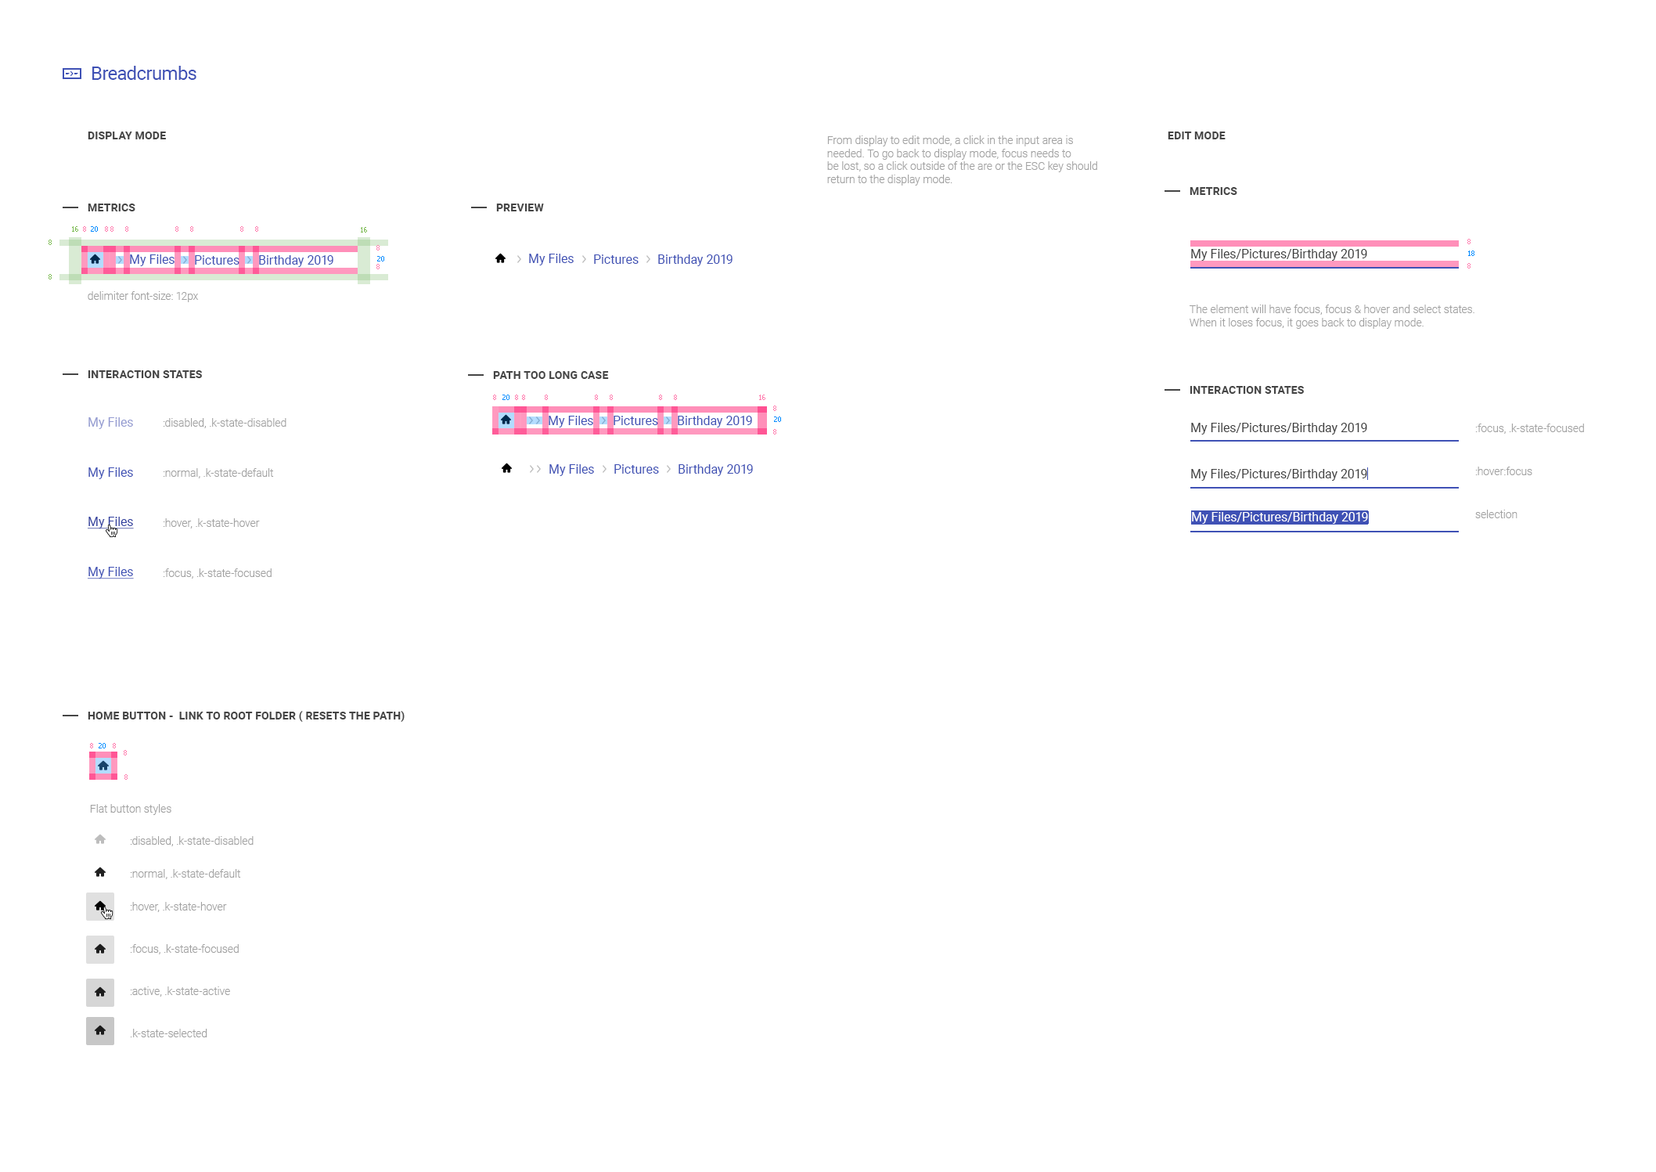
<style>
.page{position:relative;width:1656px;height:1172px;background:#ffffff}
.page>*{position:absolute;margin:0}
.t1{font:18.8px "Roboto-Regular";letter-spacing:-0.025em;color:#3f51b5}
.t2{font:11px "Roboto-Bold";letter-spacing:0.01em;color:#454545;text-transform:uppercase}
.t3{font:11px "Roboto-Light";color:#a1a1a1}
.t4{font:7px "Tahoma";color:#7dbb54}
.t5{font:7px "Tahoma";color:#ff7cae}
.t6{font:7px "Tahoma";color:#008aff}
.t7{font:12.5px "Roboto-Regular";color:#3f51b5}
.t8{font:12.5px "Roboto-Regular";color:#404040}
.t9{font:12.5px "Roboto-Regular";color:#949bd1}
.t10{font:11px/50.1px "Roboto-Light";color:#a1a1a1}
.t11{font:11px/43px "Roboto-Light";color:#a1a1a1}
.t12{font:12.5px "Roboto-Regular";color:#303f9f;text-decoration:underline}
.t13{font:12.5px "Roboto-Regular";color:#ffffff}
.t14{font:12.5px "Roboto-Regular";color:#3f51b5;text-decoration:underline}
.t15{font:11px/32.9px "Roboto-Light";color:#a1a1a1}
.t16{font:11px/42.3px "Roboto-Light";color:#a1a1a1}
</style>
<div class="page">
<p class="t1" style="left:92px;top:66px;width:104px;height:14px">Breadcrumbs</p>
<p class="t2" style="left:88px;top:131px;width:78px;height:8px">display mode</p>
<p class="t3" style="left:827px;top:135px;width:270px;height:50px">From display to edit mode, a click in the input area is <br>needed. To go back to display mode, focus needs to <br>be lost, so a click outside of the are or the ESC key should<br>return to the display mode.</p>
<p class="t2" style="left:1168px;top:131px;width:58px;height:8px">edit mode</p>
<p class="t2" style="left:1190px;top:187px;width:47px;height:8px">Metrics</p>
<p class="t2" style="left:88px;top:203px;width:47px;height:8px">Metrics</p>
<p class="t2" style="left:496px;top:203px;width:48px;height:8px">preview</p>
<p class="t4" style="left:72px;top:226px;width:6px;height:6px">16</p>
<p class="t5" style="left:83px;top:226px;width:3px;height:6px">8</p>
<p class="t6" style="left:91px;top:226px;width:7px;height:6px">20</p>
<p class="t5" style="left:105px;top:226px;width:3px;height:6px">8</p>
<p class="t5" style="left:110px;top:226px;width:3px;height:6px">8</p>
<p class="t5" style="left:125px;top:226px;width:3px;height:6px">8</p>
<p class="t5" style="left:175px;top:226px;width:3px;height:6px">8</p>
<p class="t5" style="left:190px;top:226px;width:3px;height:6px">8</p>
<p class="t5" style="left:240px;top:226px;width:3px;height:6px">8</p>
<p class="t5" style="left:255px;top:226px;width:3px;height:6px">8</p>
<p class="t4" style="left:361px;top:227px;width:6px;height:5px">16</p>
<p class="t4" style="left:49px;top:239px;width:3px;height:6px">8</p>
<p class="t5" style="left:376px;top:245px;width:4px;height:5px">8</p>
<p class="t5" style="left:1467px;top:239px;width:4px;height:5px">8</p>
<p class="t7" style="left:130px;top:254px;width:45px;height:12px">My Files</p>
<p class="t7" style="left:195px;top:255px;width:44px;height:10px">Pictures</p>
<p class="t7" style="left:259px;top:255px;width:74px;height:12px">Birthday 2019</p>
<p class="t6" style="left:377px;top:256px;width:7px;height:5px">20</p>
<p class="t7" style="left:529px;top:254px;width:45px;height:11px">My Files</p>
<p class="t7" style="left:594px;top:254px;width:45px;height:10px">Pictures</p>
<p class="t7" style="left:658px;top:254px;width:75px;height:12px">Birthday 2019</p>
<p class="t8" style="left:1191px;top:249px;width:176px;height:12px">My Files/Pictures/Birthday 2019</p>
<p class="t6" style="left:1468px;top:250px;width:6px;height:6px">18</p>
<p class="t5" style="left:376px;top:264px;width:4px;height:5px">8</p>
<p class="t5" style="left:1467px;top:263px;width:4px;height:5px">8</p>
<p class="t4" style="left:49px;top:274px;width:3px;height:5px">8</p>
<p class="t3" style="left:88px;top:291px;width:111px;height:11px">delimiter font-size: 12px</p>
<p class="t3" style="left:1190px;top:304px;width:284px;height:25px">The element will have focus, focus &amp; hover and select states.<br>When it loses focus, it goes back to display mode.</p>
<p class="t2" style="left:88px;top:370px;width:114px;height:8px">interaction states</p>
<p class="t2" style="left:493px;top:371px;width:116px;height:8px">Path too long case</p>
<p class="t2" style="left:1190px;top:386px;width:114px;height:8px">interaction states</p>
<p class="t5" style="left:493px;top:394px;width:3px;height:6px">8</p>
<p class="t6" style="left:502px;top:394px;width:7px;height:6px">20</p>
<p class="t5" style="left:515px;top:394px;width:3px;height:6px">8</p>
<p class="t5" style="left:522px;top:394px;width:3px;height:6px">8</p>
<p class="t5" style="left:545px;top:394px;width:3px;height:6px">8</p>
<p class="t5" style="left:595px;top:394px;width:3px;height:6px">8</p>
<p class="t5" style="left:610px;top:394px;width:3px;height:6px">8</p>
<p class="t5" style="left:659px;top:394px;width:3px;height:6px">8</p>
<p class="t5" style="left:674px;top:394px;width:3px;height:6px">8</p>
<p class="t5" style="left:759px;top:394px;width:6px;height:6px">16</p>
<p class="t5" style="left:773px;top:405px;width:3px;height:6px">8</p>
<p class="t9" style="left:88px;top:417px;width:45px;height:12px">My Files</p>
<p class="t10" style="left:163px;top:418px;width:123px;height:160px">:disabled, .k-state-disabled<br>:normal, .k-state-default<br>:hover, .k-state-hover<br>:focus, .k-state-focused</p>
<p class="t7" style="left:549px;top:416px;width:44px;height:11px">My Files</p>
<p class="t7" style="left:614px;top:416px;width:44px;height:9px">Pictures</p>
<p class="t7" style="left:678px;top:416px;width:74px;height:11px">Birthday 2019</p>
<p class="t6" style="left:774px;top:416px;width:7px;height:6px">20</p>
<p class="t8" style="left:1191px;top:423px;width:176px;height:11px">My Files/Pictures/Birthday 2019</p>
<p class="t11" style="left:1475px;top:423px;width:109px;height:95px">:focus, .k-state-focused<br>:hover:focus<br>selection</p>
<p class="t5" style="left:773px;top:429px;width:3px;height:5px">8</p>
<p class="t7" style="left:88px;top:467px;width:45px;height:12px">My Files</p>
<p class="t7" style="left:549px;top:464px;width:45px;height:12px">My Files</p>
<p class="t7" style="left:614px;top:464px;width:45px;height:9px">Pictures</p>
<p class="t7" style="left:679px;top:464px;width:74px;height:12px">Birthday 2019</p>
<p class="t8" style="left:1191px;top:469px;width:176px;height:12px">My Files/Pictures/Birthday 2019</p>
<p class="t12" style="left:88px;top:517px;width:46px;height:12px">My Files</p>
<p class="t13" style="left:1192px;top:512px;width:176px;height:12px">My Files/Pictures/Birthday 2019</p>
<p class="t14" style="left:88px;top:567px;width:46px;height:12px">My Files</p>
<p class="t2" style="left:88px;top:711px;width:317px;height:11px">home button -  link to root folder ( resets the path)</p>
<p class="t5" style="left:90px;top:743px;width:3px;height:5px">8</p>
<p class="t6" style="left:99px;top:743px;width:7px;height:5px">20</p>
<p class="t5" style="left:113px;top:743px;width:3px;height:5px">8</p>
<p class="t5" style="left:124px;top:750px;width:3px;height:5px">8</p>
<p class="t5" style="left:124px;top:774px;width:4px;height:5px">8</p>
<p class="t3" style="left:90px;top:804px;width:81px;height:11px">Flat button styles</p>
<p class="t15" style="left:130px;top:836px;width:124px;height:201px">:disabled, .k-state-disabled<br>:normal, .k-state-default<br>:hover, .k-state-hover<br><span class="t16">:focus, .k-state-focused<br>:active, .k-state-active<br>.k-state-selected</span></p>
</div>
